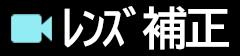
<style>
.page{position:relative;width:240px;height:56px;background:#000000}
.page>*{position:absolute;margin:0}
.t1{font:44.8px "BIZ-UDPGothic-Bold";letter-spacing:-0.05em;color:#ffffff}
</style>
<div class="page">
<p class="t1" style="left:64px;top:6px;width:165px;height:44px">ﾚﾝｽﾞ補正</p>
</div>
